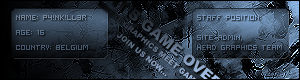
<style>
.page{position:relative;width:300px;height:80px}
.page>*{position:absolute;margin:0}
.t1{font:7.5px "Serious1";color:#72869c}
.t2{font:7.5px "Serious1";color:#7d9dc3}
.t3{font:7.5px "Serious1";color:#576c85}
.t4{font:7.5px "Serious1";color:#627a97}
.t5{font:7.5px "Serious1";color:#47586c}
.t6{font:7.5px "Serious1";color:#52667e}
</style>
<div class="page">
<p class="t1" style="left:16px;top:15px;width:70px;height:5px">NAME: p4!nk!ll3r</p>
<p class="t2" style="left:197px;top:15px;width:64px;height:5px">staff position:</p>
<p class="t3" style="left:16px;top:30px;width:28px;height:5px">age: 16</p>
<p class="t4" style="left:197px;top:35px;width:45px;height:6px">site admin,</p>
<p class="t5" style="left:16px;top:45px;width:72px;height:5px">COUNTRY: Belgium</p>
<p class="t6" style="left:197px;top:45px;width:85px;height:5px">head graphics team</p>
</div>
